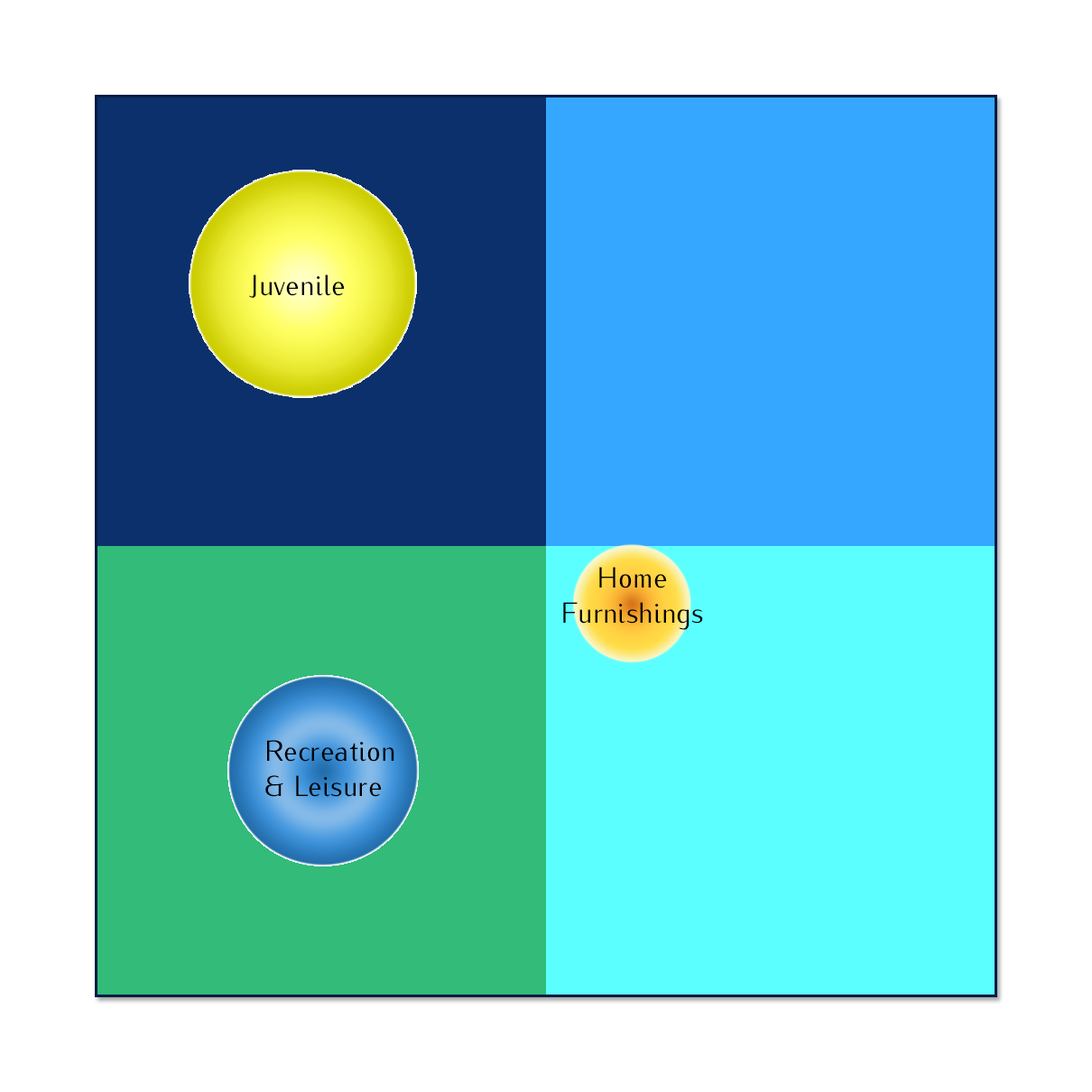
<style>
.page{position:relative;width:1092px;height:1092px;background:#ffffff}
.page>*{position:absolute;margin:0}
.t1{font:28.9px "Iwona-Regular";color:#000000}
</style>
<div class="page">
<p class="t1" style="left:249px;top:274px;width:96px;height:24px">Juvenile</p>
<p class="t1" style="left:563px;top:567px;width:140px;height:63px;text-align:center">Home <br>Furnishings</p>
<p class="t1" style="left:265px;top:740px;width:129px;height:57px">Recreation<br>&amp; Leisure</p>
</div>
